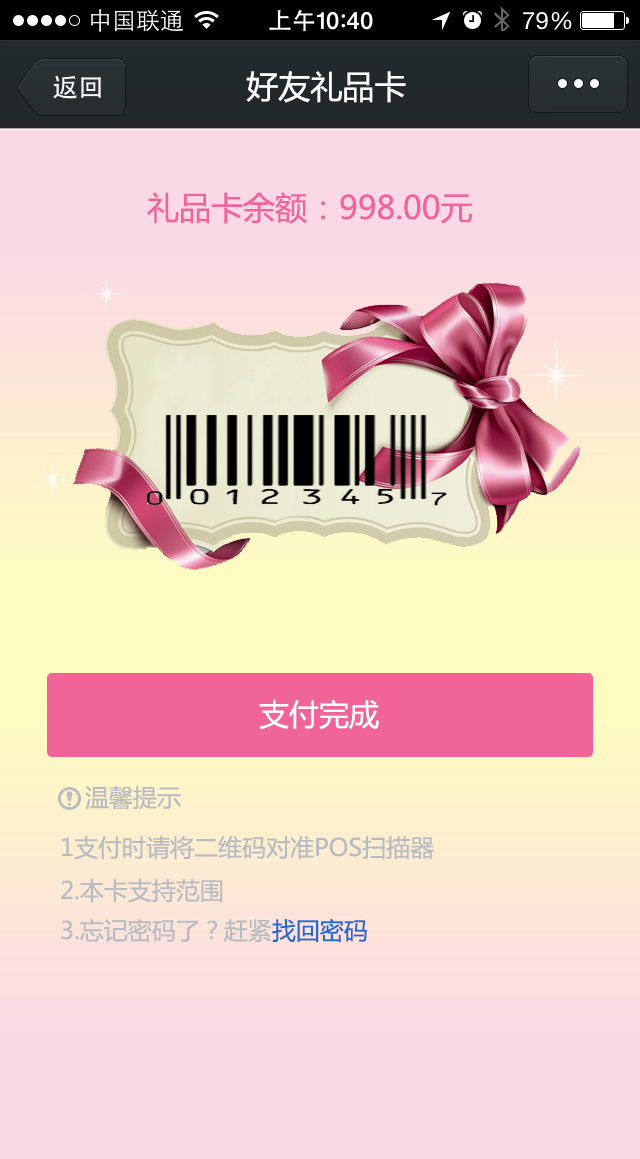
<style>
.page{position:relative;width:640px;height:1159px}
.page>*{position:absolute;margin:0}
.t1{font:32px "MicrosoftYaHei";color:#ffffff}
.t2{font:32px "MicrosoftYaHei";color:#f16498}
.t3{font:30px "MicrosoftYaHei";color:#ffffff}
.t4{font:24px "MicrosoftYaHei";color:#b7bbc2}
.t5{font:24px "MicrosoftYaHei";color:#2466d2}
</style>
<div class="page">
<p class="t1" style="left:246px;top:71px;width:160px;height:32px">好友礼品卡</p>
<p class="t2" style="left:147px;top:192px;width:326px;height:32px">礼品卡余额：998.00元</p>
<p class="t3" style="left:259px;top:699px;width:120px;height:31px">支付完成</p>
<p class="t4" style="left:85px;top:786px;width:96px;height:24px">温馨提示</p>
<p class="t4" style="left:62px;top:835px;width:372px;height:25px">1支付时请将二维码对准POS扫描器</p>
<p class="t4" style="left:61px;top:878px;width:162px;height:25px">2.本卡支持范围</p>
<p class="t4" style="left:61px;top:918px;width:306px;height:25px">3.忘记密码了？赶紧<span class="t5">找回密码</span></p>
</div>
